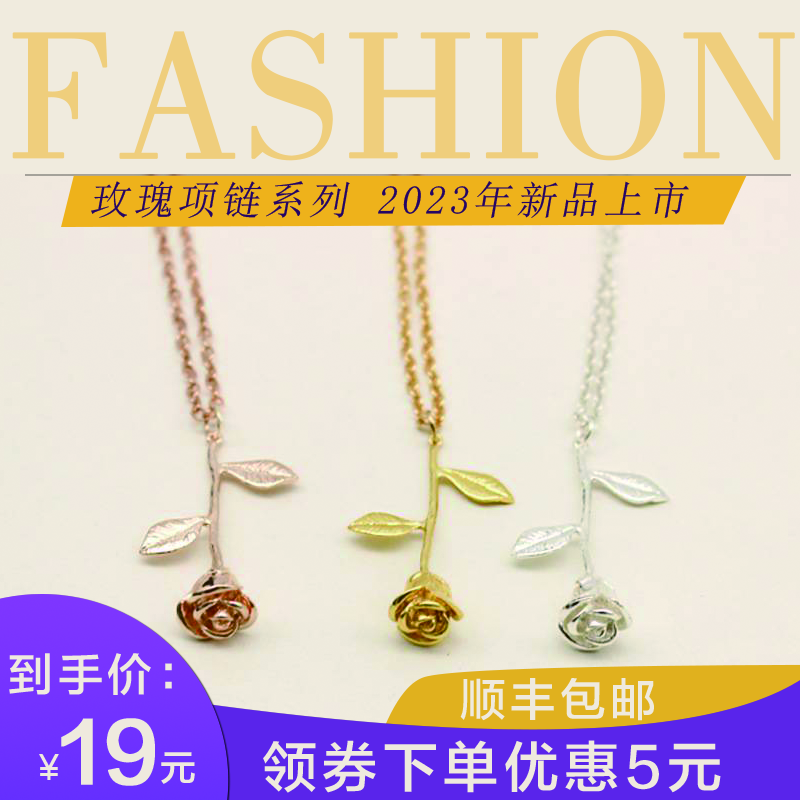
<style>
.page{position:relative;width:800px;height:800px}
.page>*{position:absolute;margin:0}
.t1{font:186.1px "FZSSJW--GB1-0";color:#efce7c;text-transform:uppercase;font-weight:bold}
.t2{font:40px "SimSun";letter-spacing:0.1em;color:#240565;text-transform:uppercase;font-style:italic}
.t3{font:40px "SimSun";letter-spacing:0.1em;color:#240565;font-style:italic}
.t4{font:45px "FZLTZHJW--GB1-0";letter-spacing:0.1em;color:#efeade}
.t5{font:80.7px "FZLTZHJW--GB1-0";color:#efeade;font-weight:bold}
.t6{font:36px "ArialMT";color:#efeade}
.t7{font:36px "FZLTZHJW--GB1-0";color:#efeade}
.t8{font:55px "FZLTZHJW--GB1-0";letter-spacing:0.1em;color:#efeade}
</style>
<div class="page">
<p class="t1" style="left:12px;top:29px;width:783px;height:132px">FASHION</p>
<p class="t2" style="left:91px;top:181px;width:598px;height:37px"><span class="t3">玫瑰项链系列 </span>2023年新品上市</p>
<p class="t4" style="left:9px;top:653px;width:163px;height:43px">到手价：</p>
<p class="t4" style="left:460px;top:678px;width:194px;height:43px">顺丰包邮</p>
<p class="t5" style="left:39px;top:718px;width:156px;height:68px"><span class="t6">¥</span>19<span class="t7">元</span></p>
<p class="t8" style="left:263px;top:740px;width:458px;height:53px">领券下单优惠5元</p>
</div>
